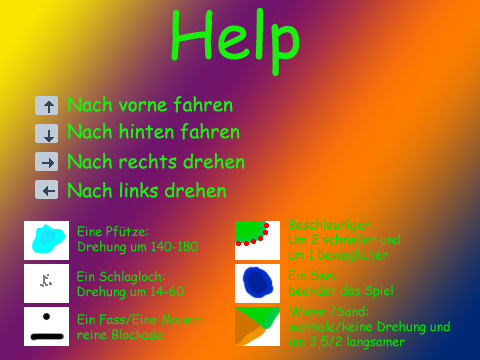
<style>
.page{position:relative;width:480px;height:360px}
.page>*{position:absolute;margin:0}
.t1{font:63.5px "ComicSansMS";color:#1aef0f}
.t2{font:12.7px "ComicSansMS";color:#08da08}
</style>
<div class="page">
<p class="t1" style="left:171px;top:8px;width:129px;height:69px">Help</p>
<p class="t2" style="left:288px;top:218px;width:112px;height:45px">Beschleuniger:<br>Um 2 schneller und<br>um 1 beweglicher</p>
<p class="t2" style="left:77px;top:225px;width:121px;height:30px">Eine Pfütze:<br>Drehung um 140-180</p>
<p class="t2" style="left:77px;top:270px;width:107px;height:30px">Ein Schlagloch:<br>Drehung um 14-60</p>
<p class="t2" style="left:288px;top:270px;width:105px;height:29px">Ein See:<br>beendet das Spiel</p>
<p class="t2" style="left:289px;top:305px;width:161px;height:45px">Wiese /Sand:<br>normale/keine Drehung und<br>um 3,5/2 langsamer</p>
<p class="t2" style="left:77px;top:313px;width:124px;height:27px">Ein Fass/Eine Mauer:<br>reine Blockade</p>
</div>
